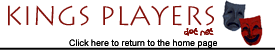
<style>
.page{position:relative;width:275px;height:50px;background:#ffffff}
.page>*{position:absolute;margin:0}
.t1{font:9px "Croobie";color:#820e08}
.t2{font:9px "ArialMT";color:#000000}
</style>
<div class="page">
<p class="t1" style="left:184px;top:28px;width:30px;height:8px">dot net</p>
<p class="t2" style="left:69px;top:39px;width:171px;height:9px">Click here to return to the home page</p>
</div>
